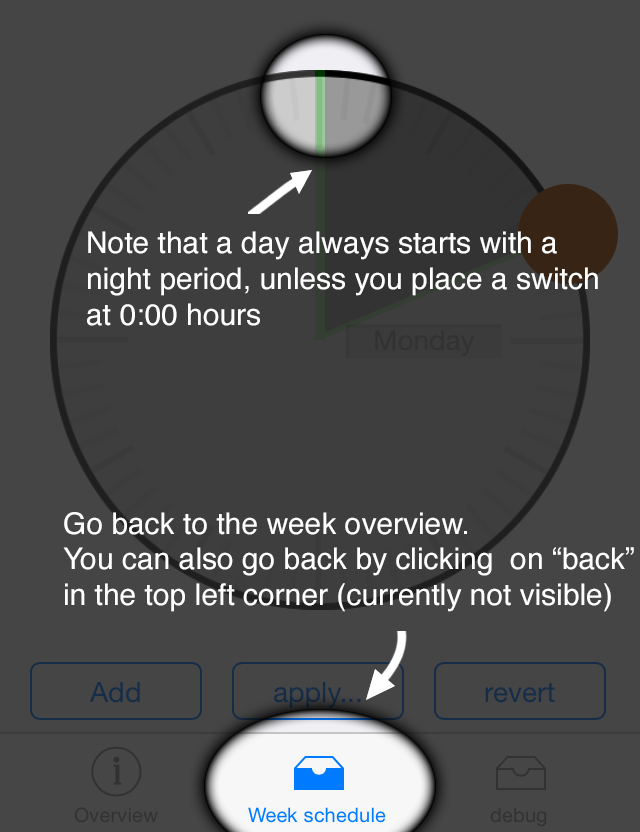
<style>
.page{position:relative;width:640px;height:832px;background:#454546}
.page>*{position:absolute;margin:0}
.t1{font:30px "Helvetica";color:#ffffff}
.t2{font:29.9px "Helvetica";color:#ffffff}
</style>
<div class="page">
<p class="t1" style="left:87px;top:231px;width:511px;height:95px">Note that a day always starts with a night period, unless you place a switch at 0:00 hours</p>
<p class="t2" style="left:63px;top:512px;width:571px;height:100px">Go back to the week overview.<br>You can also go back by clicking  on “back”<br>in the top left corner (currently not visible)</p>
</div>
